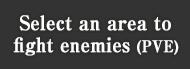
<style>
.page{position:relative;width:190px;height:69px;background:#333333}
.page>*{position:absolute;margin:0}
.t1{font:20px/22px "RyuminPro-ExBold";color:#ffffff;font-weight:bold;scale:0.9 1}
.t2{font:16px/22px "RyuminPro-ExBold";color:#ffffff;font-weight:bold;scale:0.9 1}
</style>
<div class="page">
<p class="t1" style="left:13px;top:15px;width:166px;height:41px;text-align:center">Select an area to<br>fight enemies <span class="t2">(PVE)</span></p>
</div>
